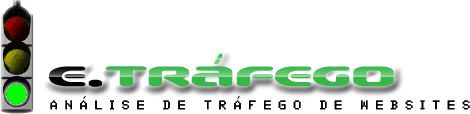
<style>
.page{position:relative;width:470px;height:114px;background:#ffffff}
.page>*{position:absolute;margin:0}
.t1{font:12.5px "01-Digit";letter-spacing:0.6em;color:#000000;font-weight:bold}
</style>
<div class="page">
<p class="t1" style="left:50px;top:100px;width:420px;height:10px">Analise de trafego de websites</p>
</div>
